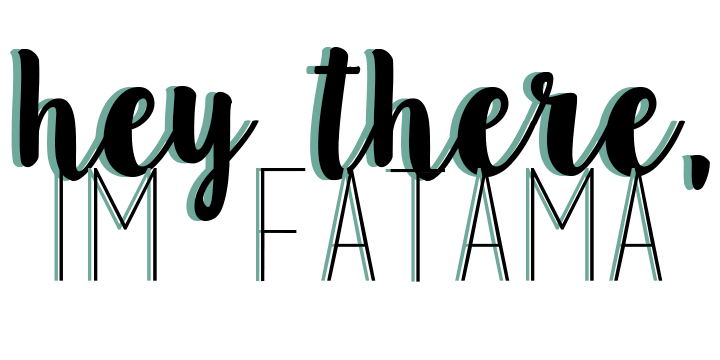
<style>
.page{position:relative;width:720px;height:360px;background:#ffffff}
.page>*{position:absolute;margin:0}
.t1{font:154.6px "LillyBelle"}
.t2{font:154.6px "LillyBelle";color:#000000}
.t3{font:154.6px "basictitlefont";color:#6ea99c}
.t4{font:154.6px "basictitlefont";color:#000000}
</style>
<div class="page">
<p class="t1" style="left:9px;top:47px;width:693px;height:174px">hey there,</p>
<p class="t2" style="left:17px;top:47px;width:693px;height:174px">hey there,</p>
<p class="t3" style="left:54px;top:168px;width:604px;height:114px">Im Fatama</p>
<p class="t4" style="left:59px;top:168px;width:604px;height:114px">Im Fatama</p>
</div>
